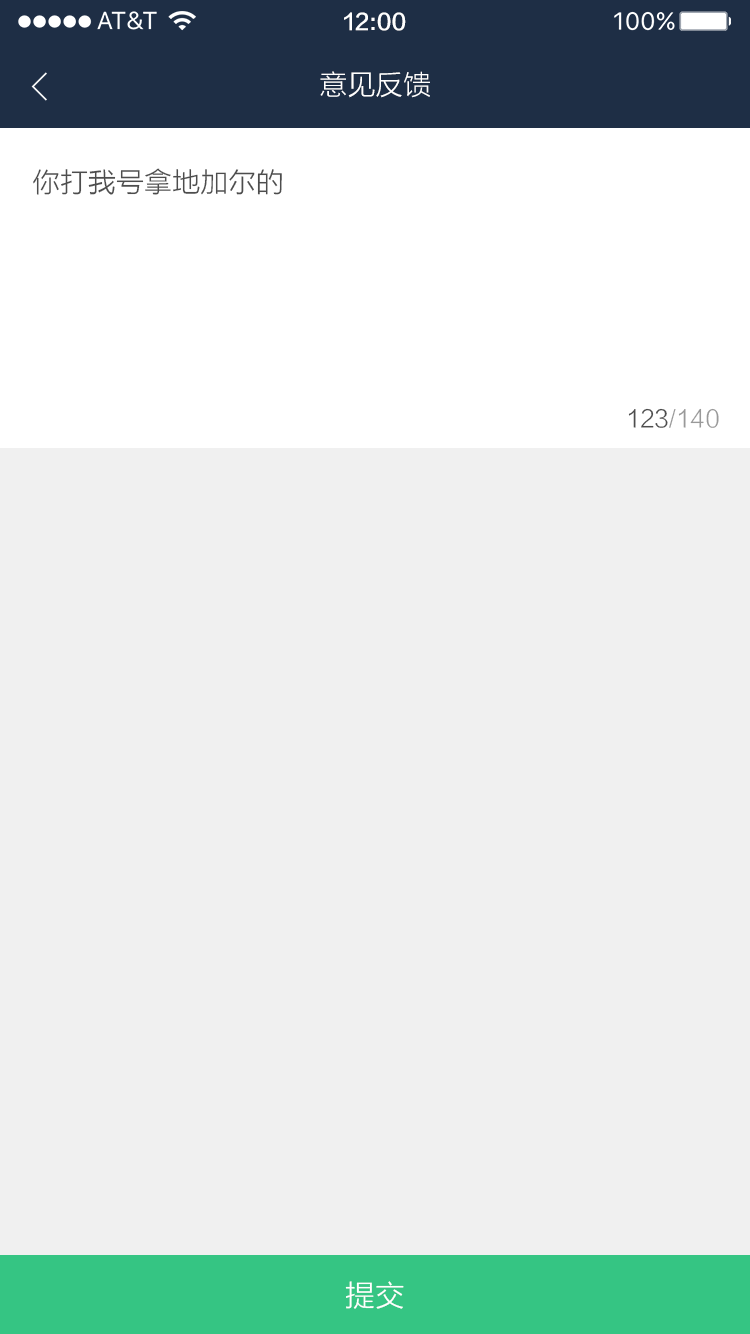
<style>
.page{position:relative;width:750px;height:1334px;background:#f0f0f0}
.page>*{position:absolute;margin:0}
.t1{font:22px "FZLTZHK--GBK1-0";color:#ffffff}
.t2{font:28px "FZLTXHK";color:#ffffff}
.t3{font:28px "FZLTXHK";color:#4d4d4d}
.t4{font:24px "FZLTXHK";color:#999999}
.t5{font:24px "FZLTXHK";color:#4d4d4d}
.t6{font:30px "FZLTXHK";color:#ffffff}
</style>
<div class="page">
<p class="t1" style="left:344px;top:12px;width:62px;height:19px">12:00</p>
<p class="t2" style="left:320px;top:71px;width:110px;height:27px">意见反馈</p>
<p class="t3" style="left:33px;top:168px;width:249px;height:27px">你打我号拿地加尔的</p>
<p class="t4" style="left:628px;top:408px;width:91px;height:20px"><span class="t5">123</span>/140</p>
<p class="t6" style="left:345px;top:1281px;width:59px;height:28px">提交</p>
</div>
